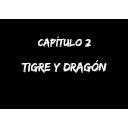
<style>
.page{position:relative;width:128px;height:128px;background:#000000}
.page>*{position:absolute;margin:0}
.t1{font:10.7px "EdoSZ";color:#ffffff;scale:1.05 1}
.t2{font:12.3px "EdoSZ";color:#ffffff}
</style>
<div class="page">
<p class="t1" style="left:38px;top:36px;width:53px;height:12px">Capítulo 2</p>
<p class="t2" style="left:21px;top:60px;width:86px;height:13px">Tigre y dragón</p>
</div>
